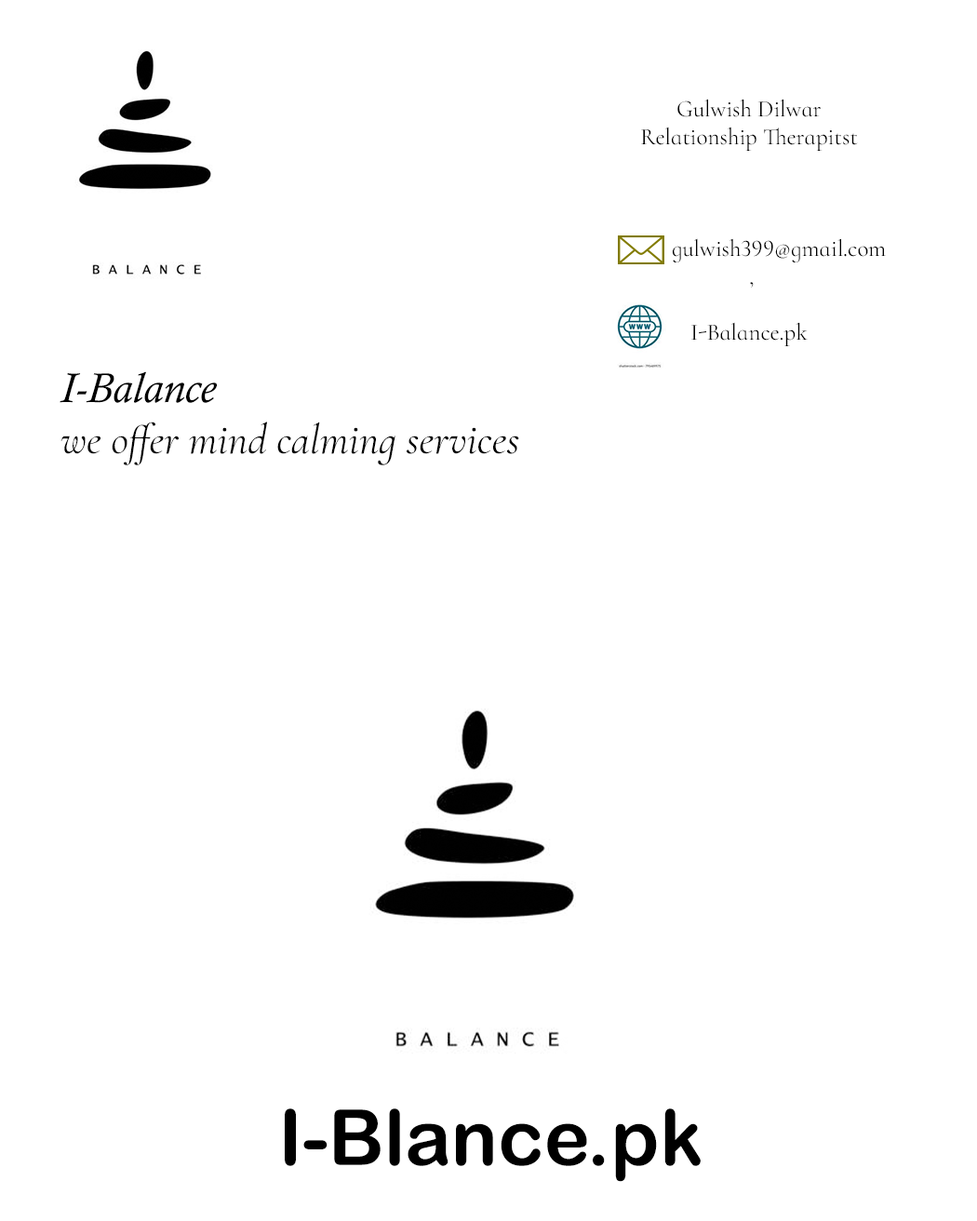
<style>
.page{position:relative;width:977px;height:1221px;background:#ffffff}
.page>*{position:absolute;margin:0}
.t1{font:23.3px "CormorantInfant-Regular";color:#000000}
.t2{font:42.6px "CormorantInfant-Italic";color:#000000}
.t3{font:42.6px "CalistoMT-Italic";color:#000000}
.t4{font:77.5px "ArialRoundedMTBold";color:#000000}
.t5{font:77.5px "Bauhaus93";color:#000000}
</style>
<div class="page">
<p class="t1" style="left:641px;top:99px;width:245px;height:247px;text-align:center">Gulwish Dilwar<br>Relationship Therapitst<br><br><br><br>           gulwish399@gmail.com <br> ,<br><br>I-Balance.pk</p>
<p class="t2" style="left:60px;top:371px;width:459px;height:94px"><span class="t3">I-Balance<br></span>we offer mind calming services</p>
<p class="t4" style="left:285px;top:1108px;width:416px;height:74px"><span class="t5">             </span>I-Blance.pk</p>
</div>
